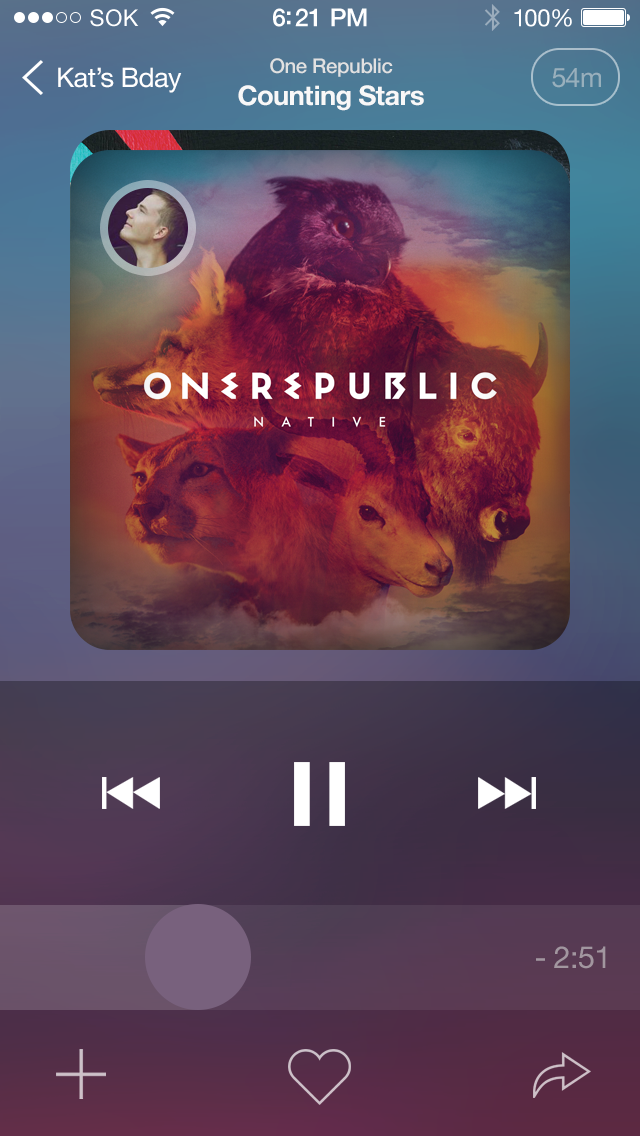
<style>
.page{position:relative;width:640px;height:1136px}
.page>*{position:absolute;margin:0}
.t1{font:23px "HelveticaNeue";letter-spacing:0.02em;color:#ffffff}
.t2{font:25px "HelveticaNeue-Medium";letter-spacing:-0.02em;color:#ffffff}
.t3{font:24px "HelveticaNeue";letter-spacing:-0.02em;color:#ffffff}
.t4{font:20.2px "HelveticaNeue-Medium";letter-spacing:-0.02em;color:#e1e1e1}
.t5{font:26.9px "HelveticaNeue";letter-spacing:-0.02em;color:#ffffff}
.t6{font:26.9px "HelveticaNeue";letter-spacing:-0.02em;color:#98b0bc}
.t7{font:27px "HelveticaNeue-Bold";letter-spacing:-0.02em;color:#f8f8f8}
.t8{font:30.4px "HelveticaNeue";letter-spacing:-0.02em;color:#a296a0}
</style>
<div class="page">
<p class="t1" style="left:90px;top:9px;width:49px;height:18px">SOK</p>
<p class="t2" style="left:273px;top:8px;width:94px;height:19px">6:21 PM</p>
<p class="t3" style="left:514px;top:9px;width:58px;height:18px">100%</p>
<p class="t4" style="left:270px;top:58px;width:123px;height:19px">One Republic</p>
<p class="t5" style="left:58px;top:67px;width:124px;height:26px">Kat’s Bday</p>
<p class="t6" style="left:552px;top:68px;width:49px;height:20px">54m</p>
<p class="t7" style="left:238px;top:85px;width:186px;height:26px">Counting Stars</p>
<p class="t8" style="left:536px;top:946px;width:70px;height:23px">- 2:51</p>
</div>
